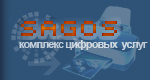
<style>
.page{position:relative;width:150px;height:80px;background:#2f5377}
.page>*{position:absolute;margin:0}
.t1{font:30px "Mini7Tight";letter-spacing:0.05em;color:#b54100}
.t2{font:11px "Arial-BoldMT";letter-spacing:-0.08em;color:#c5d0d9}
</style>
<div class="page">
<p class="t1" style="left:21px;top:21px;width:96px;height:15px">Sagos</p>
<p class="t2" style="left:19px;top:40px;width:129px;height:10px">комплекс цифровых  услуг</p>
</div>
